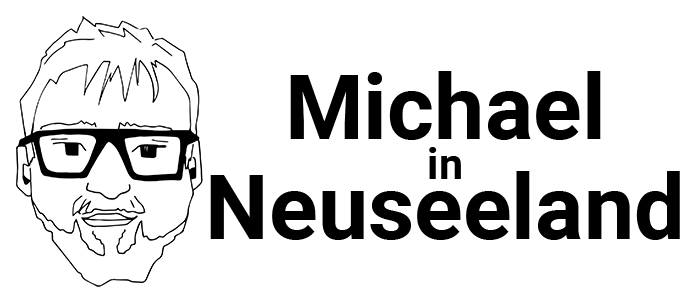
<style>
.page{position:relative;width:700px;height:300px;background:#ffffff}
.page>*{position:absolute;margin:0}
.t1{font:90px/60px "Roboto-Bold";color:#000000}
.t2{font:90px/87.5px "Roboto-Bold";color:#000000}
.t3{font:42.5px/40px "Roboto-Bold";color:#000000}
</style>
<div class="page">
<p class="t1" style="left:210px;top:71px;width:470px;height:169px;text-align:center"><span class="t2">Michael<br></span><span class="t3">in<br></span>Neuseeland</p>
</div>
